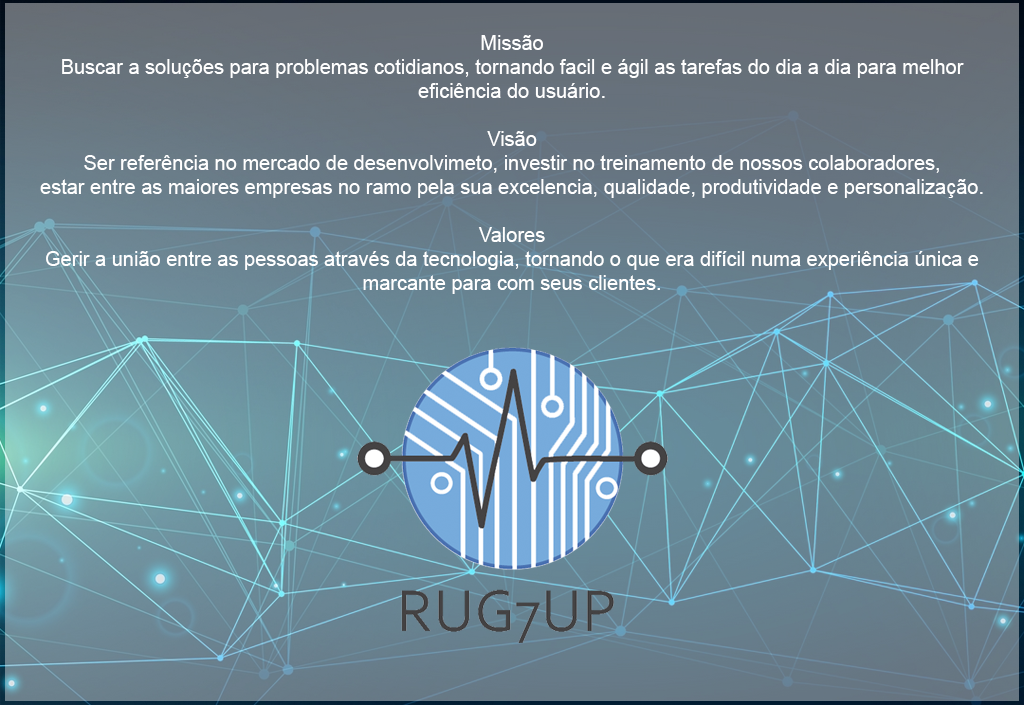
<style>
.page{position:relative;width:1024px;height:705px}
.page>*{position:absolute;margin:0}
.t1{font:20px "ArialMT";color:#ffffff}
</style>
<div class="page">
<p class="t1" style="left:40px;top:35px;width:943px;height:259px;text-align:center">Missão<br>Buscar a soluções para problemas cotidianos, tornando facil e ágil as tarefas do dia a dia para melhor<br>eficiência do usuário.<br><br>Visão<br>Ser referência no mercado de desenvolvimeto, investir no treinamento de nossos colaboradores,<br>estar entre as maiores empresas no ramo pela sua excelencia, qualidade, produtividade e personalização.<br><br>Valores<br>Gerir a união entre as pessoas através da tecnologia, tornando o que era difícil numa experiência única e<br>marcante para com seus clientes.</p>
</div>
